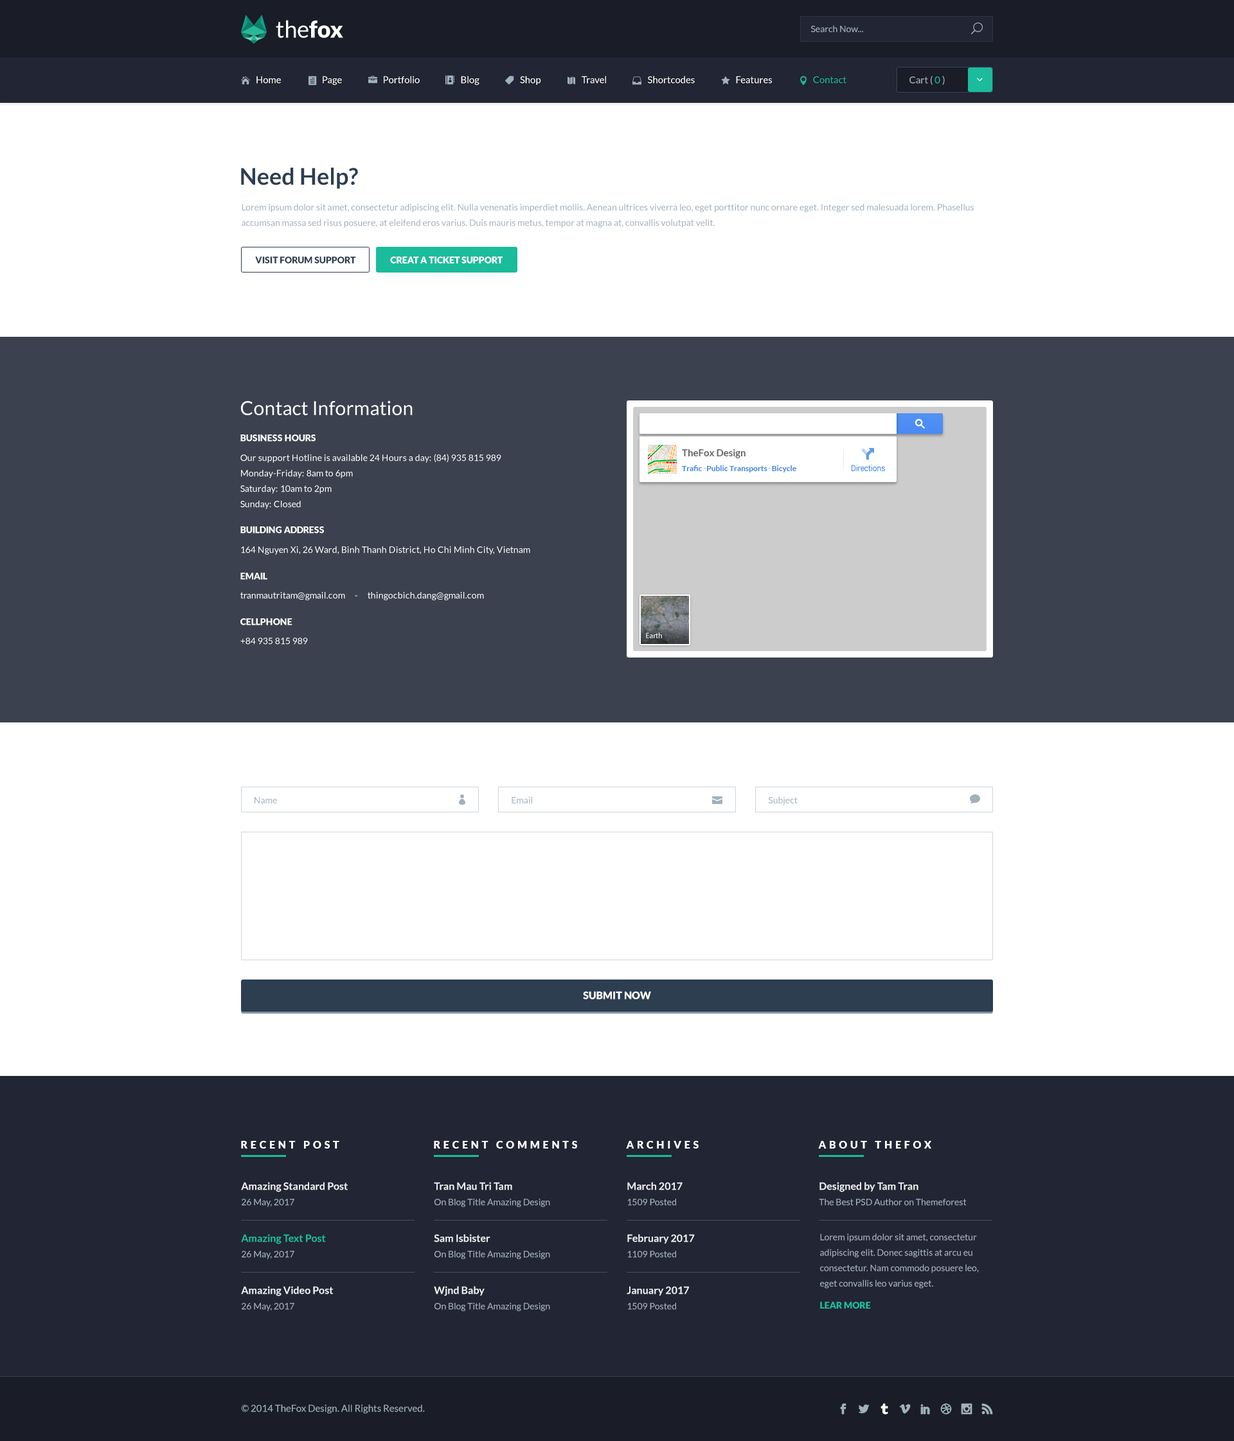
<style>
.page{position:relative;width:1234px;height:1441px;background:#ffffff}
.page>*{position:absolute;margin:0}
.t1{font:23.1px "Lato-Regular";color:#ffffff}
.t2{font:23.1px "Lato-Black";color:#ffffff}
.t3{font:9px "Lato-Regular";color:#a1b1bc}
.t4{font:9.6px "Lato-Regular";color:#ffffff}
.t5{font:9.6px "Lato-Regular";color:#1abc9c}
.t6{font:9.6px "Lato-Regular";color:#a1b1bc}
.t7{font:23.1px "Lato-Bold";color:#2c3e50}
.t8{font:9px/15.4px "Lato-Regular";color:#a1b1bc}
.t9{font:9px "Lato-Black";color:#2c3e50}
.t10{font:9px "Lato-Black";color:#ffffff}
.t11{font:19.3px "Lato-Regular";color:#ffffff}
.t12{font:7.7px/14.8px "Lato-Bold";color:#3a84df}
.t13{font:9.6px/18px "Lato-Bold";color:#666666}
.t14{font:9px/15.4px "Lato-Regular";color:#ffffff}
.t15{font:8.4px "Roboto-Light";color:#666666}
.t16{font:7.7px "Roboto-Light";color:#3a84df}
.t17{font:9px "Lato-Regular";color:#ffffff}
.t18{font:7.7px "MyriadPro-Regular";color:#ffffff}
.t19{font:10.3px "Lato-Black";color:#ffffff}
.t20{font:10.3px "Lato-Black";letter-spacing:0.3em;color:#ffffff}
.t21{font:10.3px/15.4px "Lato-Bold";color:#ecf0f1}
.t22{font:10.3px/15.4px "Lato-Bold";color:#1abc9c}
.t23{font:9px "Lato-Black";color:#1abc9c}
</style>
<div class="page">
<p class="t1" style="left:276px;top:20px;width:67px;height:18px">the<span class="t2">fox</span></p>
<p class="t3" style="left:811px;top:25px;width:52px;height:7px">Search Now...</p>
<p class="t4" style="left:256px;top:76px;width:591px;height:10px">Home                      Page                      Portfolio                      Blog                      Shop                      Travel                      Shortcodes                      Features                      <span class="t5">Contact</span></p>
<p class="t6" style="left:910px;top:76px;width:35px;height:9px">Cart ( <span class="t5">0 </span>)</p>
<p class="t7" style="left:241px;top:167px;width:117px;height:22px">Need Help?</p>
<p class="t8" style="left:242px;top:204px;width:732px;height:24px">Lorem ipsum dolor sit amet, consectetur adipiscing elit. Nulla venenatis imperdiet mollis. Aenean ultrices viverra leo, eget porttitor nunc ornare eget. Integer sed malesuada lorem. Phasellus accumsan massa sed risus posuere, at eleifend eros varius. Duis mauris metus, tempor at magna at, convallis volutpat velit.</p>
<p class="t9" style="left:255px;top:256px;width:101px;height:8px">VISIT FORUM SUPPORT</p>
<p class="t10" style="left:390px;top:256px;width:113px;height:8px">CREAT A TICKET SUPPORT</p>
<p class="t11" style="left:240px;top:401px;width:173px;height:14px">Contact Information</p>
<p class="t10" style="left:240px;top:435px;width:76px;height:7px">BUSINESS HOURS</p>
<p class="t12" style="left:682px;top:449px;width:115px;height:24px"><span class="t13">TheFox Design<br></span>Trafic   Public Transports   Bicycle</p>
<p class="t14" style="left:240px;top:454px;width:261px;height:55px">Our support Hotline is available 24 Hours a day: (84) 935 815 989<br>Monday-Friday: 8am to 6pm<br>Saturday: 10am to 2pm<br>Sunday: Closed</p>
<p class="t15" style="left:705px;top:468px;width:1px;height:1px">.</p>
<p class="t15" style="left:769px;top:468px;width:1px;height:1px">.</p>
<p class="t16" style="left:852px;top:465px;width:33px;height:6px">Directions</p>
<p class="t10" style="left:240px;top:526px;width:84px;height:8px">BUILDING ADDRESS</p>
<p class="t17" style="left:241px;top:546px;width:289px;height:9px">164 Nguyen Xi, 26 Ward, Binh Thanh District, Ho Chi Minh City, Vietnam</p>
<p class="t10" style="left:240px;top:573px;width:27px;height:7px">EMAIL</p>
<p class="t17" style="left:240px;top:592px;width:244px;height:8px">tranmautritam@gmail.com     -     thingocbich.dang@gmail.com</p>
<p class="t10" style="left:240px;top:618px;width:52px;height:8px">CELLPHONE</p>
<p class="t17" style="left:240px;top:638px;width:68px;height:7px">+84 935 815 989</p>
<p class="t18" style="left:646px;top:633px;width:16px;height:5px">Earth</p>
<p class="t3" style="left:255px;top:797px;width:22px;height:7px">Name</p>
<p class="t3" style="left:512px;top:797px;width:20px;height:7px">Email</p>
<p class="t3" style="left:768px;top:797px;width:30px;height:9px">Subject</p>
<p class="t19" style="left:583px;top:991px;width:68px;height:9px">SUBMIT NOW</p>
<p class="t20" style="left:241px;top:1141px;width:98px;height:8px">RECENT POST</p>
<p class="t20" style="left:434px;top:1141px;width:143px;height:8px">RECENT COMMENTS</p>
<p class="t20" style="left:626px;top:1141px;width:73px;height:8px">ARCHIVES</p>
<p class="t20" style="left:818px;top:1141px;width:114px;height:8px">ABOUT THEFOX</p>
<p class="t21" style="left:241px;top:1182px;width:107px;height:25px">Amazing Standard Post<br><span class="t8">26 May, 2017</span></p>
<p class="t8" style="left:434px;top:1182px;width:116px;height:25px"><span class="t21">Tran Mau Tri Tam<br></span>On Blog Title Amazing Design</p>
<p class="t8" style="left:627px;top:1182px;width:56px;height:24px"><span class="t21">March 2017<br></span>1509 Posted</p>
<p class="t8" style="left:819px;top:1182px;width:148px;height:24px"><span class="t21">Designed by Tam Tran<br></span>The Best PSD Author on Themeforest</p>
<p class="t22" style="left:241px;top:1234px;width:85px;height:25px">Amazing Text Post<br><span class="t8">26 May, 2017</span></p>
<p class="t8" style="left:434px;top:1234px;width:116px;height:25px"><span class="t21">Sam Isbister<br></span>On Blog Title Amazing Design</p>
<p class="t21" style="left:627px;top:1234px;width:68px;height:24px">February 2017<br><span class="t8">1109 Posted</span></p>
<p class="t8" style="left:820px;top:1234px;width:159px;height:55px">Lorem ipsum dolor sit amet, consectetur adipiscing elit. Donec sagittis at arcu eu consectetur. Nam commodo posuere leo, eget convallis leo varius eget.</p>
<p class="t21" style="left:241px;top:1286px;width:92px;height:25px">Amazing Video Post<br><span class="t8">26 May, 2017</span></p>
<p class="t8" style="left:434px;top:1286px;width:116px;height:25px"><span class="t21">Wjnd Baby<br></span>On Blog Title Amazing Design</p>
<p class="t21" style="left:627px;top:1286px;width:62px;height:24px">January 2017<br><span class="t8">1509 Posted</span></p>
<p class="t23" style="left:820px;top:1302px;width:51px;height:7px">LEAR MORE</p>
<p class="t6" style="left:241px;top:1405px;width:184px;height:9px">© 2014 TheFox Design. All Rights Reserved.</p>
</div>
